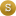
<style>
.page{position:relative;width:16px;height:16px}
.page>*{position:absolute;margin:0}
.t1{font:11px "Rockwell";letter-spacing:0.01em;color:#ededed}
</style>
<div class="page">
<p class="t1" style="left:5px;top:3px;width:6px;height:9px">S</p>
</div>
